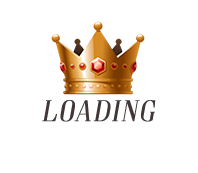
<style>
.page{position:relative;width:198px;height:173px;background:#ffffff}
.page>*{position:absolute;margin:0}
.t1{font:30px/20.8px "Goldoni";letter-spacing:-0.01em;color:#413737;font-weight:bold;font-style:italic}
</style>
<div class="page">
<p class="t1" style="left:42px;top:100px;width:114px;height:22px;text-align:center">LOADING<br><br>LOADING</p>
</div>
